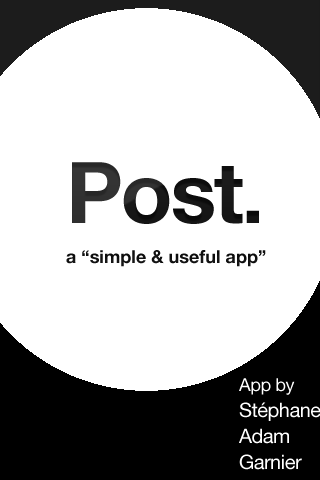
<style>
.page{position:relative;width:320px;height:480px;background:#ffffff}
.page>*{position:absolute;margin:0}
.t1{font:85px "HelveticaNeue-Bold";letter-spacing:-0.025em;color:#191919}
.t2{font:85px "Helvetica-Bold";letter-spacing:-0.025em;color:#191919}
.t3{font:18px "HelveticaNeue-Bold";color:#191919}
.t4{font:20px/26px "HelveticaNeue";letter-spacing:-0.025em;color:#ffffff}
.t5{font:18px/26px "HelveticaNeue";letter-spacing:-0.025em;color:#ffffff}
</style>
<div class="page">
<p class="t1" style="left:72px;top:162px;width:187px;height:62px">Post<span class="t2">.</span></p>
<p class="t3" style="left:66px;top:250px;width:200px;height:17px">a “simple &amp; useful app”</p>
<p class="t4" style="left:239px;top:378px;width:82px;height:92px"><span class="t5">App by <br></span>Stéphane<br>Adam<br>Garnier</p>
</div>
